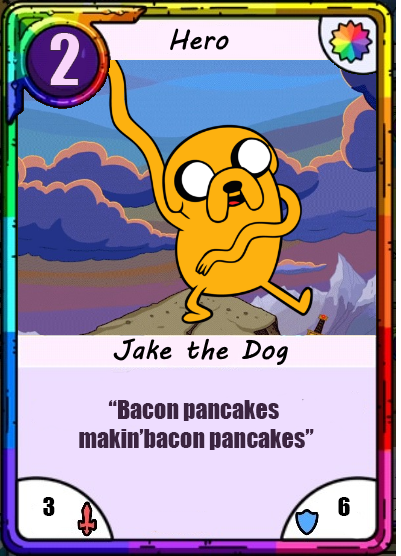
<style>
.page{position:relative;width:401px;height:556px}
.page>*{position:absolute;margin:0}
.t1{font:66.7px "Impact";color:#f8d4fa}
.t2{font:24px "Impact";color:#3b2440}
.t3{font:24px "Impact";color:#000000}
</style>
<div class="page">
<p class="t1" style="left:49px;top:32px;width:31px;height:54px">2</p>
<p class="t2" style="left:79px;top:400px;width:235px;height:50px;text-align:center">“Bacon pancakes <br>makin’bacon pancakes”</p>
<p class="t3" style="left:43px;top:497px;width:12px;height:19px">3</p>
<p class="t3" style="left:338px;top:497px;width:12px;height:19px">6</p>
</div>
